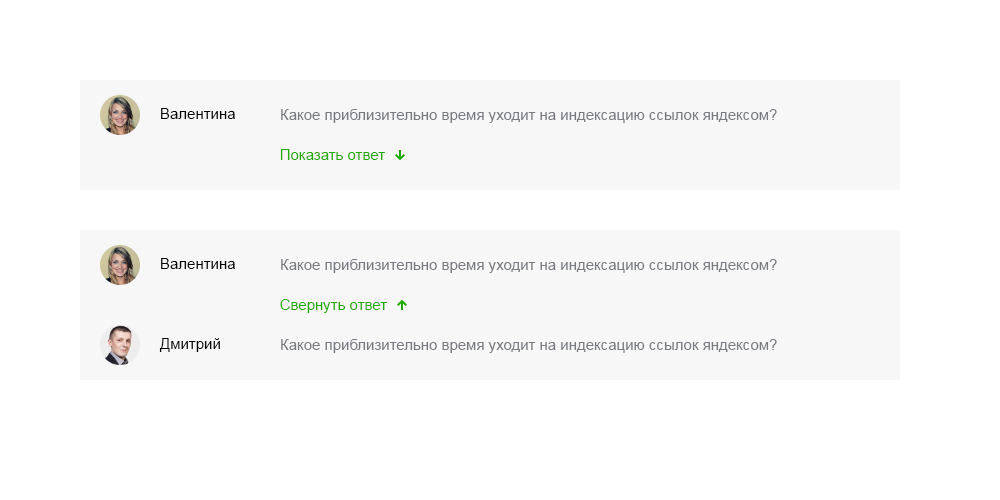
<style>
.page{position:relative;width:1000px;height:500px;background:#ffffff}
.page>*{position:absolute;margin:0}
.t1{font:15px "ArialMT";color:#000000}
.t2{font:15px "ArialMT";color:#787a80}
.t3{font:15px "ArialMT";color:#21aa00}
</style>
<div class="page">
<p class="t1" style="left:161px;top:108px;width:74px;height:11px">Валентина</p>
<p class="t2" style="left:281px;top:109px;width:496px;height:14px">Какое приблизительно время уходит на индексацию ссылок яндексом?</p>
<p class="t3" style="left:280px;top:149px;width:105px;height:11px">Показать ответ</p>
<p class="t1" style="left:161px;top:258px;width:74px;height:11px">Валентина</p>
<p class="t2" style="left:281px;top:259px;width:496px;height:14px">Какое приблизительно время уходит на индексацию ссылок яндексом?</p>
<p class="t3" style="left:280px;top:299px;width:107px;height:14px">Свернуть ответ</p>
<p class="t1" style="left:159px;top:338px;width:61px;height:14px">Дмитрий</p>
<p class="t2" style="left:281px;top:339px;width:496px;height:14px">Какое приблизительно время уходит на индексацию ссылок яндексом?</p>
</div>
